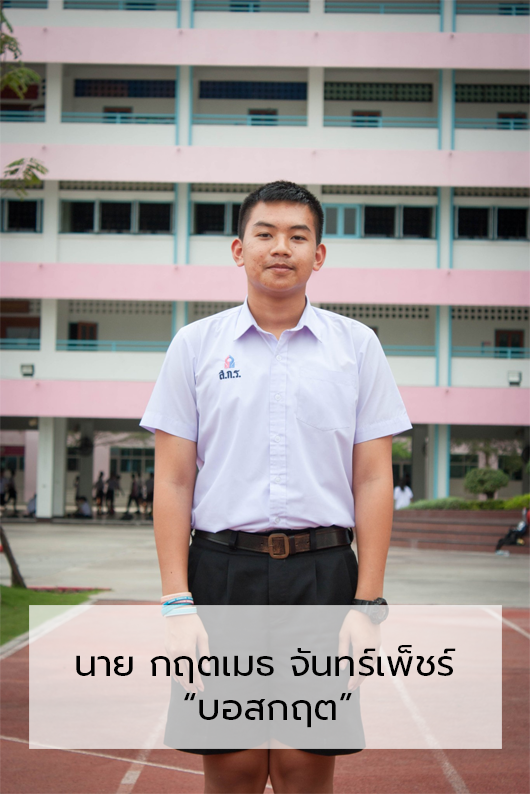
<style>
.page{position:relative;width:530px;height:794px}
.page>*{position:absolute;margin:0}
.t1{font:36.7px "Prompt-Regular";color:#000000}
</style>
<div class="page">
<p class="t1" style="left:76px;top:645px;width:380px;height:83px">นาย กฤตเมธ จันทร์เพ็ชร์<br>        “บอสกฤต”</p>
</div>
